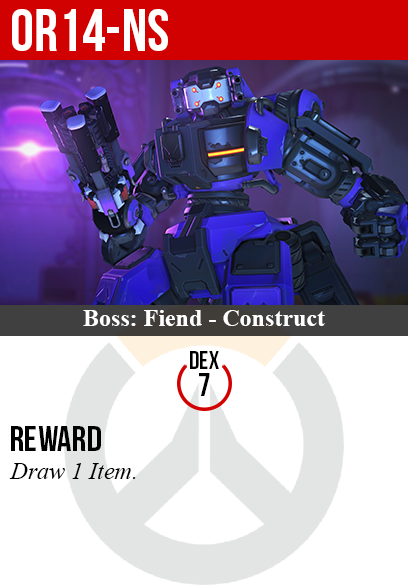
<style>
.page{position:relative;width:408px;height:585px;background:#ffffff}
.page>*{position:absolute;margin:0}
.t1{font:60px "BebasNeue";color:#ffffff}
.t2{font:24px "TimesNewRomanPS-BoldMT";color:#ffffff}
.t3{font:25px "BebasNeue";color:#000000}
.t4{font:32px "BebasNeue";color:#000000}
.t5{font:36px "BebasNeue";color:#000000}
.t6{font:24px "TimesNewRomanPS-ItalicMT";color:#000000}
</style>
<div class="page">
<p class="t1" style="left:12px;top:9px;width:156px;height:42px">or14-ns</p>
<p class="t2" style="left:83px;top:310px;width:242px;height:16px">Boss: Fiend - Construct</p>
<p class="t3" style="left:190px;top:351px;width:29px;height:18px">dex</p>
<p class="t4" style="left:199px;top:373px;width:11px;height:23px">7</p>
<p class="t5" style="left:11px;top:426px;width:90px;height:25px">reward</p>
<p class="t6" style="left:9px;top:463px;width:127px;height:16px">Draw 1 Item.</p>
</div>
